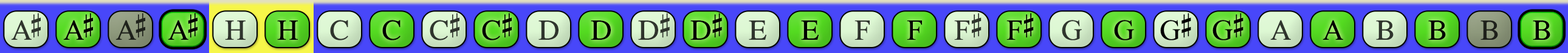
<style>
.page{position:relative;width:1568px;height:53px}
.page>*{position:absolute;margin:0}
.t1{font:29.2px "OpusChords";letter-spacing:-0.1em;color:#2f352d}
.t2{font:29.2px "OpusChords";letter-spacing:-0.1em;color:#000000}
.t3{font:29.2px "OpusChords";letter-spacing:-0.1em;color:#1e211b}
.t4{font:29.2px "OpusChords";color:#2f352d}
.t5{font:29.2px "OpusChords";color:#000000}
.t6{font:29.2px "OpusChords";letter-spacing:-0.025em;color:#2f352d}
.t7{font:29.2px "OpusChords";letter-spacing:-0.025em;color:#000000}
.t8{font:29.2px "OpusChords";color:#30352d}
.t9{font:29.2px "OpusChords";color:#30362e}
.t10{font:29.2px "OpusChords";color:#1f211b}
</style>
<div class="page">
<p class="t1" style="left:11px;top:13px;width:30px;height:27px">A#</p>
<p class="t2" style="left:63px;top:13px;width:30px;height:27px">A#</p>
<p class="t3" style="left:115px;top:13px;width:30px;height:27px">A#</p>
<p class="t2" style="left:168px;top:13px;width:30px;height:27px">A#</p>
<p class="t4" style="left:430px;top:13px;width:29px;height:28px">C#</p>
<p class="t5" style="left:482px;top:13px;width:30px;height:28px">C#</p>
<p class="t6" style="left:638px;top:13px;width:32px;height:27px">D#</p>
<p class="t7" style="left:690px;top:13px;width:32px;height:27px">D#</p>
<p class="t8" style="left:954px;top:13px;width:28px;height:27px">F#</p>
<p class="t5" style="left:1006px;top:13px;width:28px;height:27px">F#</p>
<p class="t7" style="left:1160px;top:13px;width:31px;height:28px">G#</p>
<p class="t7" style="left:1212px;top:13px;width:31px;height:28px">G#</p>
<p class="t8" style="left:225px;top:21px;width:21px;height:19px">H</p>
<p class="t5" style="left:277px;top:21px;width:21px;height:19px">H</p>
<p class="t9" style="left:330px;top:20px;width:18px;height:21px">C</p>
<p class="t5" style="left:382px;top:20px;width:19px;height:21px">C</p>
<p class="t4" style="left:538px;top:21px;width:21px;height:19px">D</p>
<p class="t5" style="left:591px;top:21px;width:20px;height:19px">D</p>
<p class="t9" style="left:749px;top:21px;width:17px;height:19px">E</p>
<p class="t5" style="left:801px;top:21px;width:18px;height:19px">E</p>
<p class="t9" style="left:854px;top:21px;width:16px;height:19px">F</p>
<p class="t5" style="left:907px;top:21px;width:15px;height:19px">F</p>
<p class="t4" style="left:1062px;top:20px;width:20px;height:21px">G</p>
<p class="t5" style="left:1114px;top:20px;width:20px;height:21px">G</p>
<p class="t4" style="left:1270px;top:20px;width:21px;height:20px">A</p>
<p class="t5" style="left:1322px;top:20px;width:21px;height:20px">A</p>
<p class="t8" style="left:1376px;top:21px;width:18px;height:19px">B</p>
<p class="t5" style="left:1428px;top:21px;width:18px;height:19px">B</p>
<p class="t10" style="left:1480px;top:21px;width:18px;height:19px">B</p>
<p class="t5" style="left:1533px;top:21px;width:17px;height:19px">B</p>
</div>
